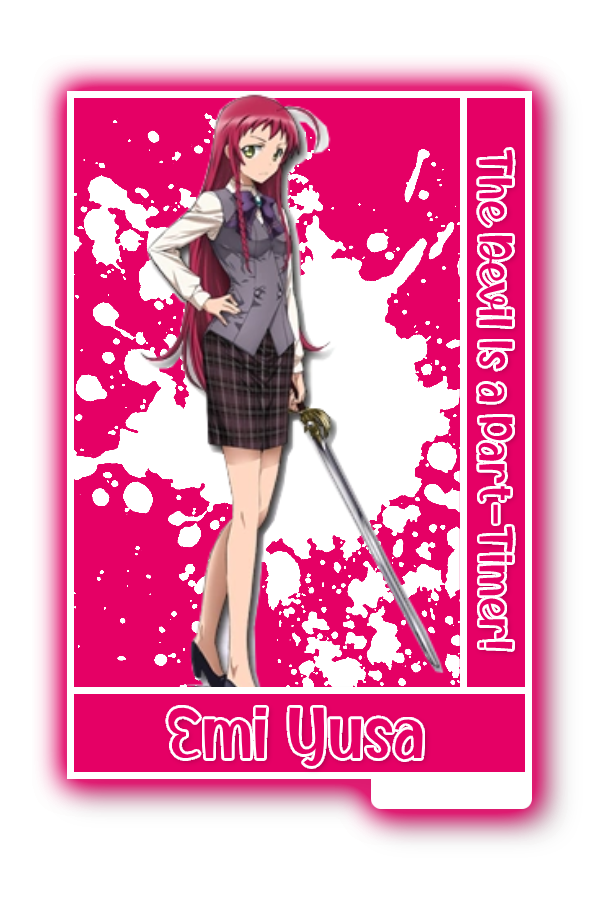
<style>
.page{position:relative;width:600px;height:900px;background:#ffffff}
.page>*{position:absolute;margin:0}
.t1{font:48.8px "ButterFood";color:#e50065}
.t2{font:75px "ButterFood";color:#e50065}
</style>
<div class="page">
<p class="t1" style="left:478px;top:149px;width:37px;height:500px;rotate:90deg">The Devil Is a Part-Timer!</p>
<p class="t2" style="left:167px;top:707px;width:256px;height:60px">Emi Yusa</p>
</div>
